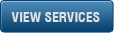
<style>
.page{position:relative;width:114px;height:33px}
.page>*{position:absolute;margin:0}
.t1{font:13.8px "Swiss721BT-BoldCondensedDType";color:#e1e1e1}
</style>
<div class="page">
<p class="t1" style="left:11px;top:12px;width:89px;height:10px">VIEW SERVICES</p>
</div>
